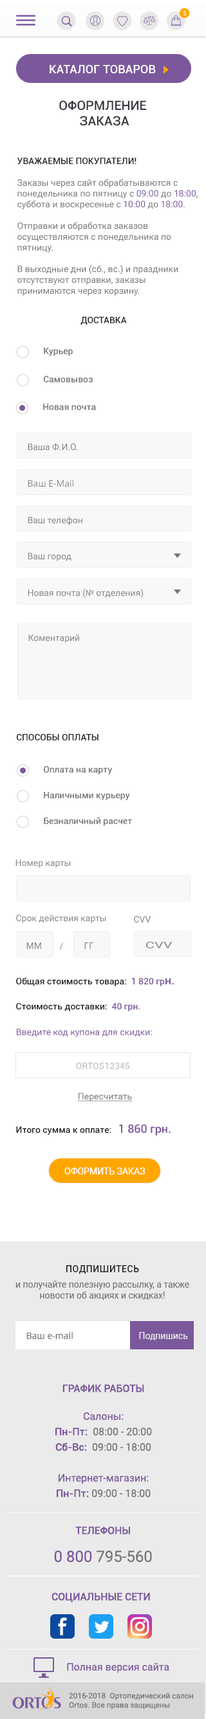
<style>
.page{position:relative;width:206px;height:1719px;background:#ffffff}
.page>*{position:absolute;margin:0}
.t1{font:6.6px "MyriadPro-Regular";letter-spacing:0.1em;color:#ffffff;text-transform:uppercase}
.t2{font:11.6px "Roboto-Medium";letter-spacing:0.01em;color:#ffffff;text-transform:uppercase}
.t3{font:12.9px "Roboto-Medium";color:#34373d;text-transform:uppercase}
.t4{font:9px "Roboto-Regular";color:#757575}
.t5{font:9px "Roboto-Medium";color:#212121;text-transform:uppercase}
.t6{font:9px "Roboto-Regular";color:#7b589c}
.t7{font:9px "Roboto-Medium";letter-spacing:-0.002em;color:#212121;text-transform:uppercase}
.t8{font:9px "Roboto-Medium";letter-spacing:-0.002em;color:#757575}
.t9{font:9px "Roboto-Regular";letter-spacing:-0.002em;color:#838383}
.t10{font:9px "OpenSans";letter-spacing:-0.002em;color:#838383}
.t11{font:9px "MyriadPro-Regular";letter-spacing:-0.002em;color:#838383}
.t12{font:9px "Roboto-Regular";letter-spacing:-0.002em;color:#838383;scale:1.56 1}
.t13{font:9px "Roboto-Regular";letter-spacing:-0.002em;color:#838383;text-transform:uppercase}
.t14{font:9px "Roboto-Medium";letter-spacing:-0.002em;color:#212121}
.t15{font:9px "Roboto-Medium";letter-spacing:-0.002em;color:#7b589c;text-transform:uppercase}
.t16{font:9px "Roboto-Medium";letter-spacing:-0.002em;color:#7b589c}
.t17{font:11.6px "Roboto-Medium";letter-spacing:-0.002em;color:#7b589c}
.t18{font:9px "Roboto-Medium";color:#c6c6c6}
.t19{font:9px "Roboto-Regular";color:#757575;text-decoration:underline}
.t20{font:11.6px "Roboto-Medium";letter-spacing:-0.002em;color:#7b589c;text-transform:uppercase}
.t21{font:9px "Roboto-Regular";color:#ffffff;text-transform:uppercase}
.t22{font:9px/15.4px "Roboto-Regular";color:#757575}
.t23{font:9px "Roboto-Medium";letter-spacing:0.05em;color:#212121;text-transform:uppercase}
.t24{font:9px "OpenSans";color:#757575}
.t25{font:9px "Roboto-Regular";color:#ebebeb}
.t26{font:10.3px/15.4px "Roboto-Regular";color:#7b589c}
.t27{font:10.3px "Roboto-Medium";color:#7b589c;text-transform:uppercase}
.t28{font:10.3px/15.4px "Roboto-Medium";color:#7b589c}
.t29{font:10.3px/15.4px "Roboto-Regular";color:#757575}
.t30{font:15.4px/15.4px "Roboto-Regular";color:#7b589c}
.t31{font:15.4px/15.4px "Roboto-Regular";color:#757575}
.t32{font:10.3px "Roboto-Regular";color:#7b589c}
.t33{font:7.7px "Roboto-Regular";color:#757575}
</style>
<div class="page">
<p class="t1" style="left:183px;top:11px;width:3px;height:4px">5</p>
<p class="t2" style="left:50px;top:65px;width:106px;height:8px">Каталог товаров</p>
<p class="t3" style="left:59px;top:100px;width:87px;height:26px;text-align:center">Оформление <br>заказа</p>
<p class="t4" style="left:17px;top:158px;width:180px;height:138px"><span class="t5">Уважаемые покупатели!<br><br></span>Заказы через сайт обрабатываются с понедельника по пятницу с <span class="t6">09:00</span> до <span class="t6">18:00</span>, <br>суббота и воскресенье с <span class="t6">10:00</span> до <span class="t6">18:00</span>.<br><br>Отправки и обработка заказов осуществляются с понедельника по пятницу.<br><br>В выходные дни (сб., вс.) и праздники отсутствуют отправки, заказы принимаются через корзину.</p>
<p class="t7" style="left:80px;top:316px;width:47px;height:9px">Доставка</p>
<p class="t8" style="left:44px;top:347px;width:29px;height:9px">Курьер</p>
<p class="t8" style="left:44px;top:375px;width:49px;height:7px">Самовывоз</p>
<p class="t8" style="left:43px;top:403px;width:53px;height:7px">Новая почта</p>
<p class="t9" style="left:28px;top:443px;width:50px;height:8px">Ваша Ф.И.О.</p>
<p class="t10" style="left:28px;top:480px;width:45px;height:7px">Ваш E-Mail</p>
<p class="t9" style="left:28px;top:516px;width:54px;height:9px">Ваш телефон</p>
<p class="t9" style="left:28px;top:553px;width:43px;height:8px">Ваш город</p>
<p class="t9" style="left:28px;top:588px;width:115px;height:10px">Новая почта (<span class="t11">№</span> отделения)</p>
<p class="t9" style="left:28px;top:634px;width:51px;height:9px">Коментарий</p>
<p class="t7" style="left:17px;top:734px;width:81px;height:7px">Способы оплаты</p>
<p class="t8" style="left:44px;top:766px;width:69px;height:9px">Оплата на карту</p>
<p class="t8" style="left:44px;top:791px;width:86px;height:9px">Наличными курьеру</p>
<p class="t8" style="left:44px;top:817px;width:88px;height:9px">Безналичный расчет</p>
<p class="t9" style="left:15px;top:860px;width:56px;height:8px">Номер карты</p>
<p class="t9" style="left:16px;top:914px;width:90px;height:9px">Срок действия карты</p>
<p class="t9" style="left:134px;top:915px;width:17px;height:8px">CVV</p>
<p class="t12" style="left:146px;top:941px;width:26px;height:8px">CVV</p>
<p class="t13" style="left:26px;top:942px;width:15px;height:7px">мм</p>
<p class="t9" style="left:59px;top:942px;width:4px;height:8px">/</p>
<p class="t13" style="left:84px;top:942px;width:10px;height:7px">гг</p>
<p class="t14" style="left:16px;top:977px;width:158px;height:9px">Общая стоимость товара<span class="t7">:  </span><span class="t15">1 820 </span><span class="t16">гр</span><span class="t17">н.</span></p>
<p class="t14" style="left:16px;top:1003px;width:124px;height:8px">Стоимость доставки<span class="t7">:  </span><span class="t15">40 </span><span class="t16">грн.</span></p>
<p class="t6" style="left:17px;top:1029px;width:135px;height:9px">Введите код купона для скидки:</p>
<p class="t18" style="left:76px;top:1063px;width:54px;height:6px">ОRTOS12345</p>
<p class="t19" style="left:77px;top:1093px;width:55px;height:8px">Пересчитать</p>
<p class="t14" style="left:16px;top:1124px;width:154px;height:11px">Итого сумма к оплате:   <span class="t20">1 860 </span><span class="t17">грн.</span></p>
<p class="t21" style="left:64px;top:1167px;width:81px;height:7px">Оформить заказ</p>
<p class="t22" style="left:15px;top:1265px;width:174px;height:35px;text-align:center"><span class="t23">Подпишитесь <br></span>и получайте полезную рассылку, а также <span class="t4">новости об акциях и скидках!</span></p>
<p class="t24" style="left:26px;top:1332px;width:47px;height:7px">Ваш e-mail</p>
<p class="t25" style="left:139px;top:1332px;width:49px;height:8px">Подпишись</p>
<p class="t26" style="left:55px;top:1384px;width:97px;height:113px;text-align:center"><span class="t27">График работы<br><br></span>Салоны: <br><span class="t28">Пн-Пт:</span><span class="t29">  08:00 - 20:00 <br></span><span class="t28">Сб-Вс:</span><span class="t29">  09:00 - 18:00<br><br></span>Интернет-магазин:<br><span class="t28">Пн-Пт:</span><span class="t29"> 09:00 - 18:00</span></p>
<p class="t27" style="left:54px;top:1526px;width:98px;height:36px;text-align:center">Телефоны<br><br><span class="t30">0 800 </span><span class="t31">795-560</span></p>
<p class="t27" style="left:51px;top:1592px;width:99px;height:11px">Социальные сети</p>
<p class="t32" style="left:67px;top:1662px;width:102px;height:11px">Полная версия сайта</p>
<p class="t33" style="left:69px;top:1693px;width:124px;height:16px">2016-2018  Ортопедический салон Ortos. Все права защищены</p>
</div>
